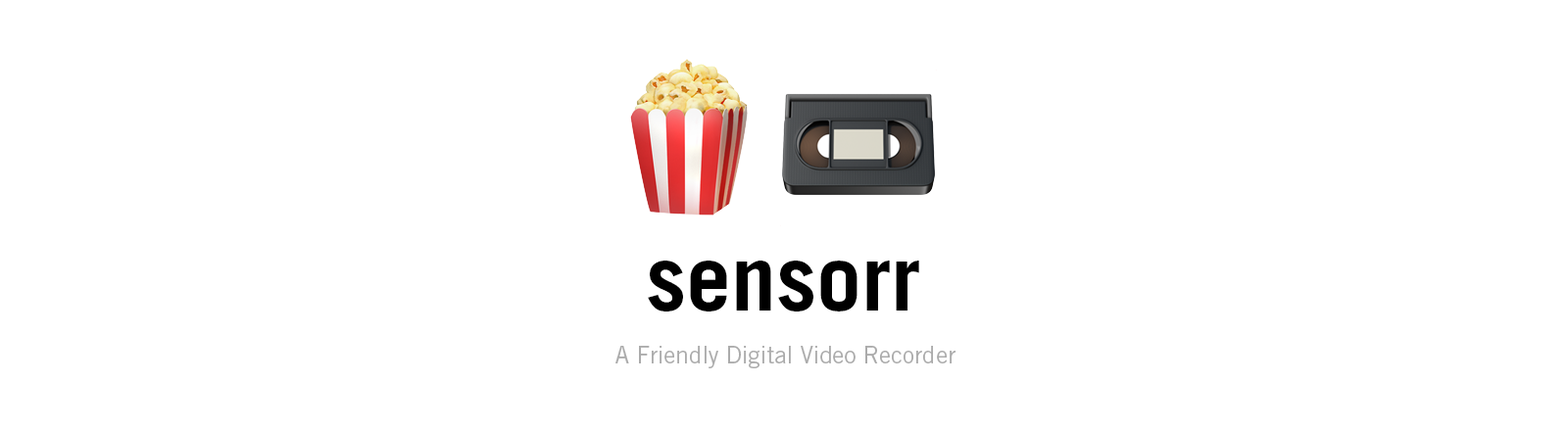
<style>
.page{position:relative;width:1568px;height:431px;background:#ffffff}
.page>*{position:absolute;margin:0}
.t1{font:90.2px "TradeGothicLTStd-Bold";color:#000000}
.t2{font:23.5px "TradeGothicLTStd";color:#ababab}
</style>
<div class="page">
<p class="t1" style="left:648px;top:261px;width:271px;height:51px">sensorr</p>
<p class="t2" style="left:615px;top:346px;width:341px;height:22px">A Friendly Digital Video Recorder</p>
</div>
